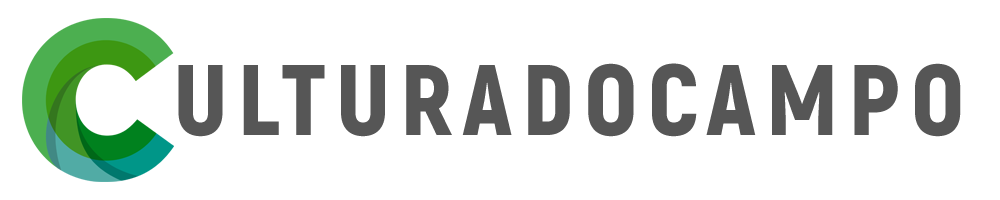
<style>
.page{position:relative;width:1000px;height:200px;background:#ffffff}
.page>*{position:absolute;margin:0}
.t1{font:100px "Akrobat-Black";letter-spacing:0.1em;color:#565656;text-transform:uppercase}
</style>
<div class="page">
<p class="t1" style="left:178px;top:63px;width:783px;height:74px">ulturadocampo</p>
</div>
